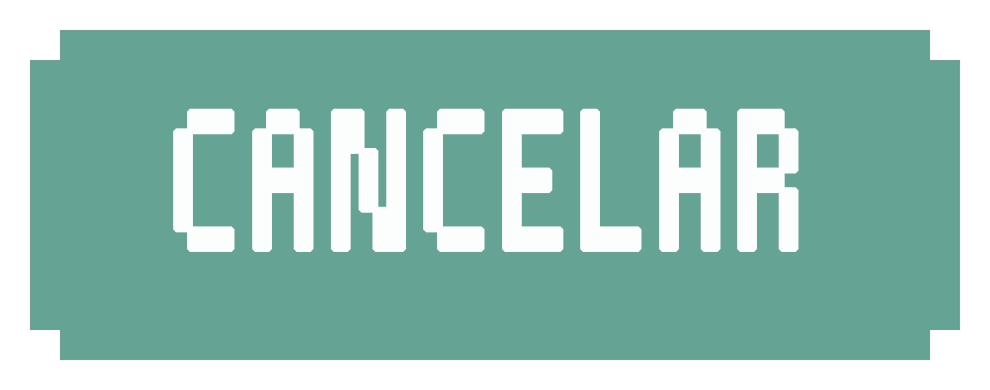
<style>
.page{position:relative;width:990px;height:390px;background:#65a394}
.page>*{position:absolute;margin:0}
.t1{font:255px "Pixelade";letter-spacing:0.025em;color:#fcfefe;font-weight:bold;scale:0.71 1}
</style>
<div class="page">
<p class="t1" style="left:173px;top:108px;width:626px;height:144px">CANCELAR</p>
</div>
